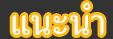
<style>
.page{position:relative;width:113px;height:39px;background:#333333}
.page>*{position:absolute;margin:0}
.t1{font:50px "EucrosiaUPC";color:#ffffff}
</style>
<div class="page">
<p class="t1" style="left:12px;top:3px;width:92px;height:32px">แนะนำ</p>
</div>
